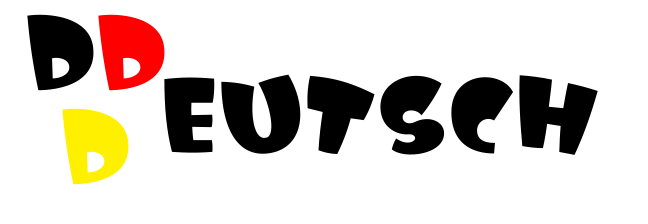
<style>
.page{position:relative;width:648px;height:224px;background:#ffffff}
.page>*{position:absolute;margin:0}
.t1{font:106.9px/94px "WellwaitFree-Regular";color:#000000;scale:1.06 1}
.t2{font:106.9px/94px "WellwaitFree-Regular";color:#ff0000;scale:1.06 1}
.t3{font:106.9px/94px "WellwaitFree-Regular";color:#fff000;scale:1.06 1}
.t4{font:106.9px "WellwaitFree-Regular";color:#000000;scale:1.06 1}
</style>
<div class="page">
<p class="t1" style="left:27px;top:14px;width:138px;height:171px;text-align:center">D<span class="t2">D<br></span><span class="t3">D</span></p>
<p class="t4" style="left:164px;top:74px;width:434px;height:81px">eutsch</p>
</div>
